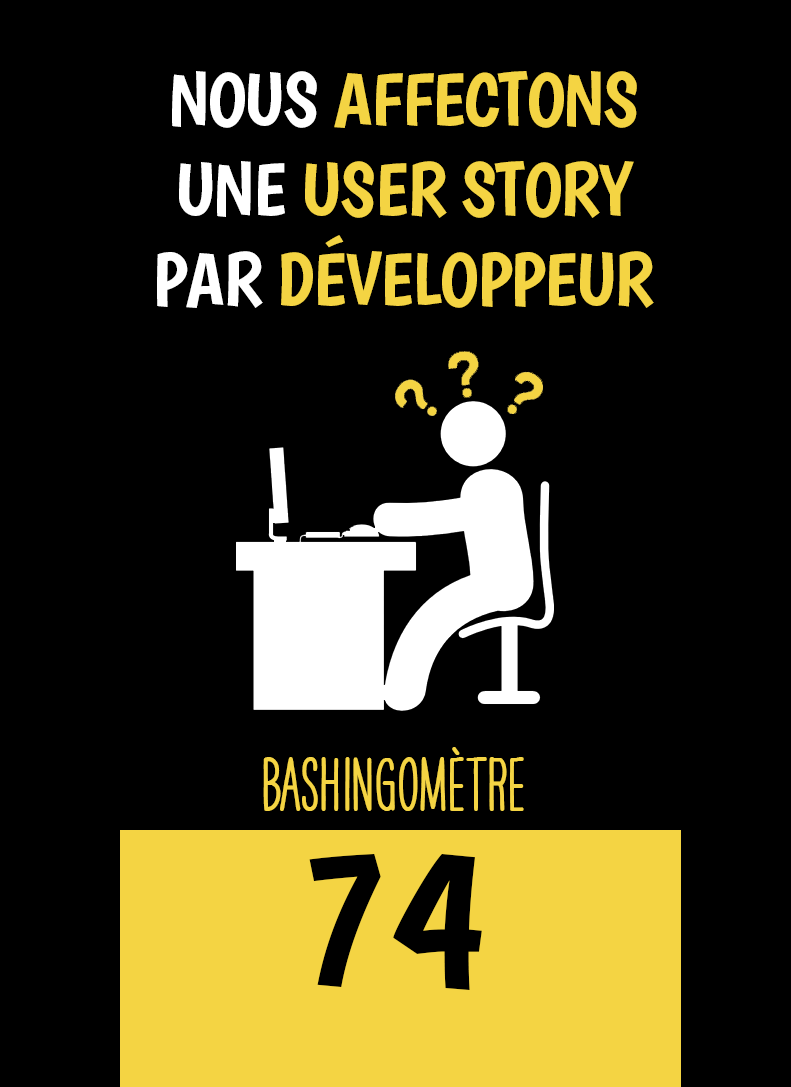
<style>
.page{position:relative;width:791px;height:1087px;background:#000000}
.page>*{position:absolute;margin:0}
.t1{font:75px "Boogaloo-Regular";letter-spacing:-0.02em;color:#f4d443}
.t2{font:75px "Boogaloo-Regular";letter-spacing:-0.02em;color:#ffffff}
.t3{font:66.7px "HAVEANICEDAYTallW04-Bold";color:#f4d443}
.t4{font:200px "Boogaloo-Regular";color:#000000}
</style>
<div class="page">
<p class="t1" style="left:157px;top:71px;width:497px;height:237px;text-align:center"><span class="t2">NOUS </span>AFFECTONS<br><span class="t2">UNE </span>USER STORY<br><span class="t2">PAR </span>DÉVELOPPEUR</p>
<p class="t3" style="left:263px;top:747px;width:261px;height:64px">BASHINgomètre</p>
<p class="t4" style="left:309px;top:854px;width:173px;height:136px">74</p>
</div>
